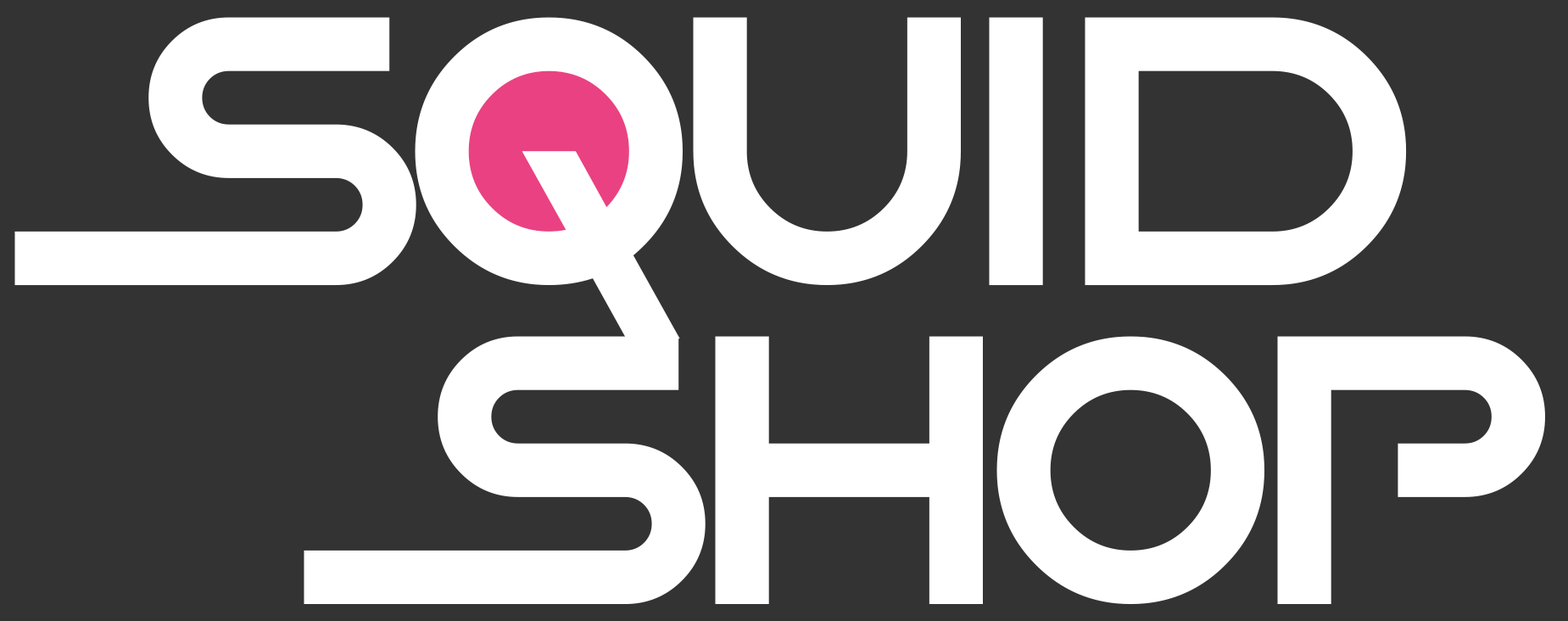
<style>
.page{position:relative;width:1568px;height:621px;background:#333333}
.page>*{position:absolute;margin:0}
.t1{font:428px "GameOfSquids";letter-spacing:-0.04em;color:#ffffff}
</style>
<div class="page">
<p class="t1" style="left:14px;top:17px;width:1393px;height:322px">SQUID</p>
<p class="t1" style="left:304px;top:336px;width:1241px;height:268px">SHOP</p>
</div>
